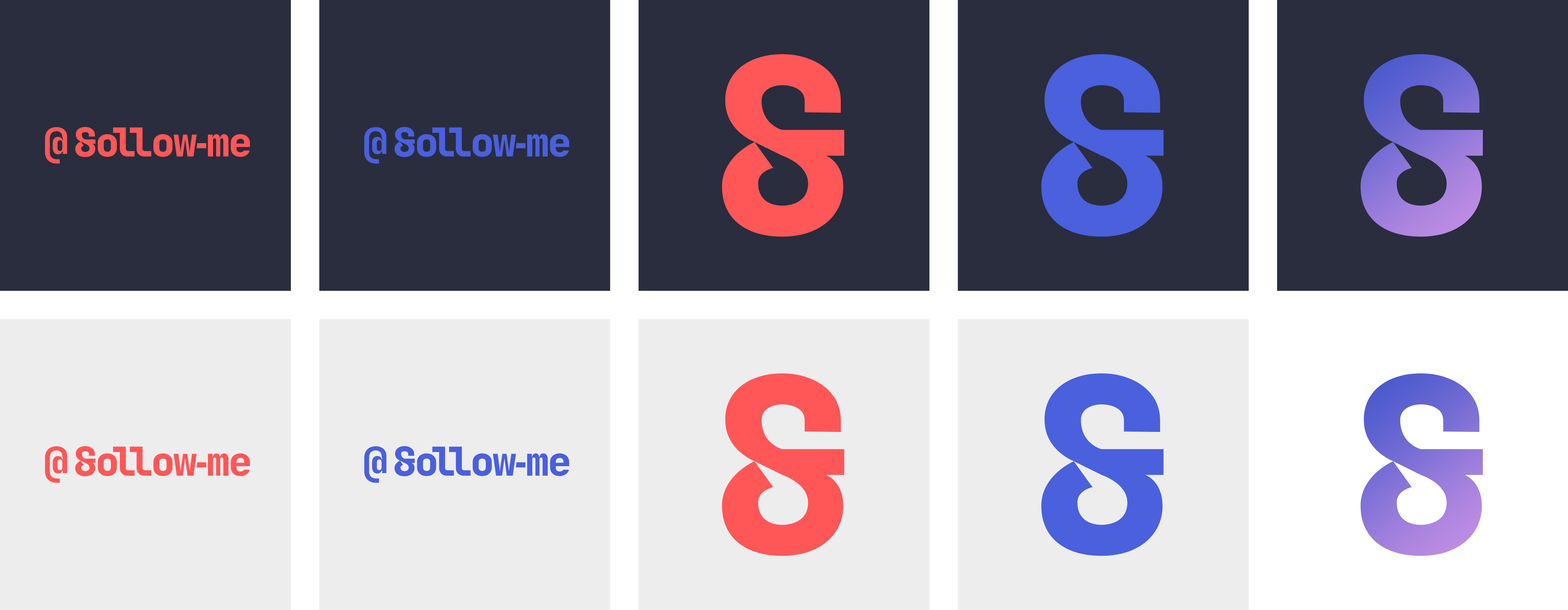
<style>
.page{position:relative;width:1568px;height:610px;background:#292d3e}
.page>*{position:absolute;margin:0}
.t1{font:39.8px "JetBrainsMono-ExtraBold";color:#ff5757}
.t2{font:39.8px "JetBrainsMono-ExtraBold";letter-spacing:-0.042em;color:#ff5757}
.t3{font:39.8px "JetBrainsMono-ExtraBold";letter-spacing:-0.18em;color:#ff5757}
.t4{font:39.8px "JetBrainsMono-ExtraBold";letter-spacing:-0.179em;color:#ff5757}
.t5{font:39.8px "JetBrainsMono-ExtraBold";letter-spacing:-0.134em;color:#ff5757}
.t6{font:39.8px "JetBrainsMono-ExtraBold";color:#4a60dd}
.t7{font:39.8px "JetBrainsMono-ExtraBold";letter-spacing:-0.042em;color:#4a60dd}
.t8{font:39.8px "JetBrainsMono-ExtraBold";letter-spacing:-0.18em;color:#4a60dd}
.t9{font:39.8px "JetBrainsMono-ExtraBold";letter-spacing:-0.179em;color:#4a60dd}
.t10{font:39.8px "JetBrainsMono-ExtraBold";letter-spacing:-0.134em;color:#4a60dd}
</style>
<div class="page">
<p class="t1" style="left:45px;top:127px;width:22px;height:37px">@</p>
<p class="t2" style="left:98px;top:127px;width:99px;height:30px"><span class="t3">o</span><span class="t4">l</span>lo<span class="t5">w</span></p>
<p class="t2" style="left:208px;top:134px;width:42px;height:23px">me</p>
<p class="t6" style="left:364px;top:127px;width:23px;height:37px">@</p>
<p class="t7" style="left:417px;top:127px;width:99px;height:30px"><span class="t8">o</span><span class="t9">l</span>lo<span class="t10">w</span></p>
<p class="t7" style="left:527px;top:134px;width:42px;height:23px">me</p>
<p class="t1" style="left:45px;top:446px;width:22px;height:37px">@</p>
<p class="t2" style="left:98px;top:447px;width:99px;height:29px"><span class="t3">o</span><span class="t4">l</span>lo<span class="t5">w</span></p>
<p class="t6" style="left:364px;top:446px;width:23px;height:37px">@</p>
<p class="t7" style="left:417px;top:447px;width:99px;height:29px"><span class="t8">o</span><span class="t9">l</span>lo<span class="t10">w</span></p>
<p class="t2" style="left:208px;top:453px;width:42px;height:23px">me</p>
<p class="t7" style="left:527px;top:453px;width:42px;height:23px">me</p>
</div>
